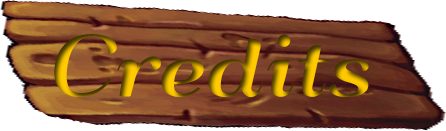
<style>
.page{position:relative;width:446px;height:131px}
.page>*{position:absolute;margin:0}
.t1{font:76px "QumpellkaNo12";font-weight:bold}
</style>
<div class="page">
<p class="t1" style="left:54px;top:34px;width:315px;height:63px">Credits</p>
</div>
